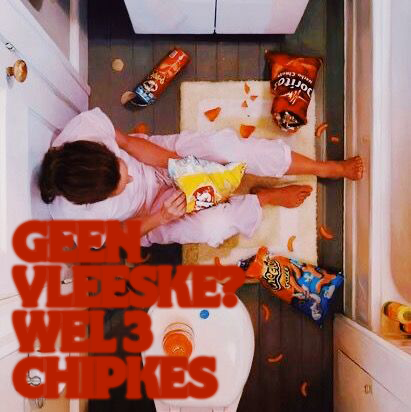
<style>
.page{position:relative;width:411px;height:412px}
.page>*{position:absolute;margin:0}
.t1{font:45.4px/45.4px "NYBotanicalGothic-Extrabold";letter-spacing:-0.02em;color:#b81f00}
</style>
<div class="page">
<p class="t1" style="left:13px;top:221px;width:231px;height:176px">GEEN VLEESKE?<br>WEL 3<br>CHIPKES</p>
</div>
